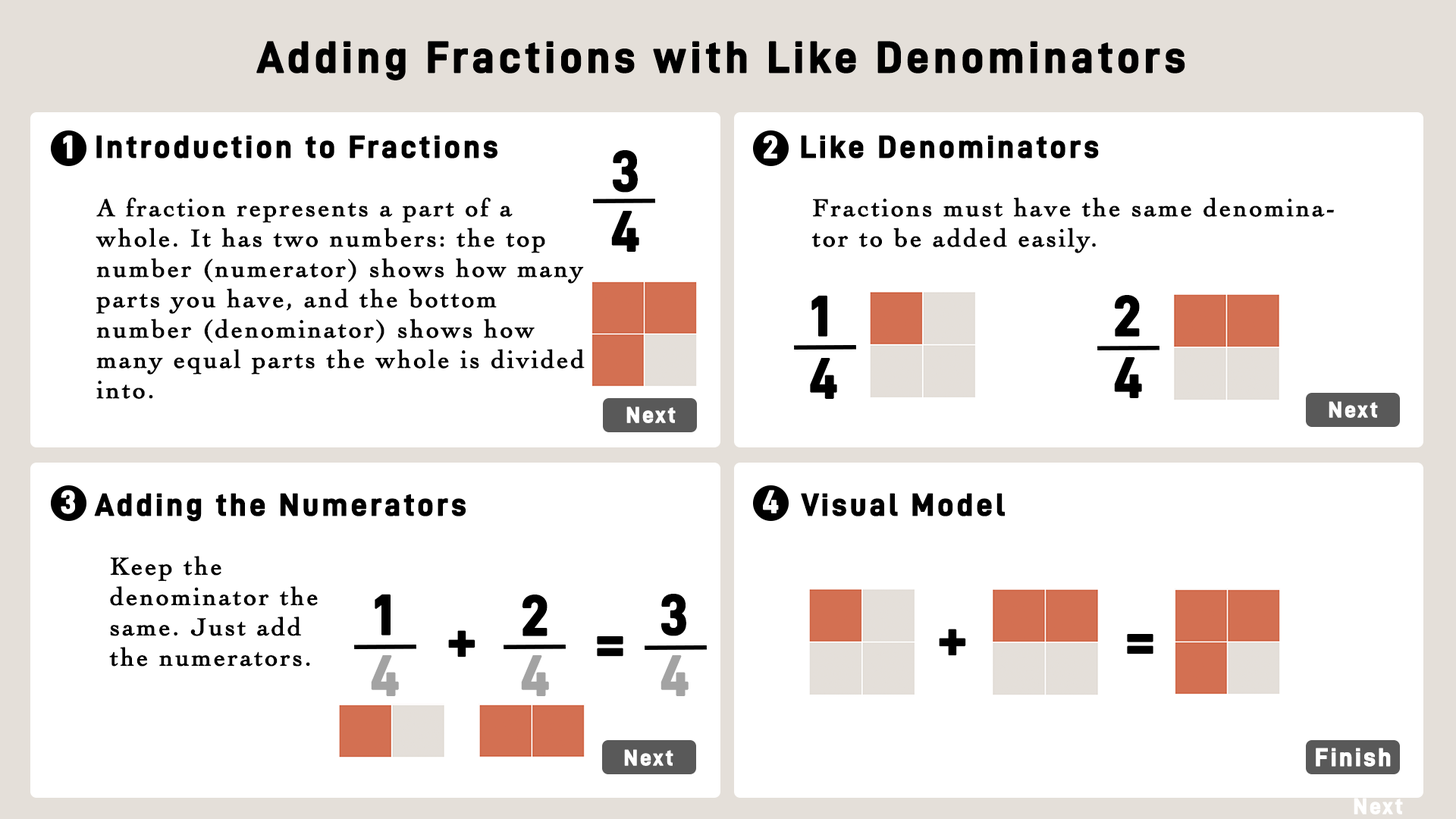
<style>
.page{position:relative;width:1456px;height:819px;background:#ffffff}
.page>*{position:absolute;margin:0}
.t1{font:44.2px "D-DIN-Bold";letter-spacing:0.075em;color:#000000;font-weight:bold}
.t2{font:31.6px "D-DIN-Bold";letter-spacing:0.075em;color:#ffffff;font-weight:bold}
.t3{font:31.6px "D-DIN-Bold";letter-spacing:0.075em;color:#000000;font-weight:bold}
.t4{font:56.9px "D-DIN-Bold";letter-spacing:0.075em;color:#000000;font-weight:bold}
.t5{font:25.3px "Cochin";letter-spacing:0.075em;color:#000000;font-weight:bold}
.t6{font:22.1px "D-DIN-Bold";letter-spacing:0.075em;color:#ffffff;font-weight:bold}
.t7{font:56.9px "D-DIN-Bold";letter-spacing:0.075em;color:#a3a3a3;font-weight:bold}
.t8{font:25.3px "D-DIN-Bold";letter-spacing:0.075em;color:#ffffff;font-weight:bold}
</style>
<div class="page">
<p class="t1" style="left:256px;top:41px;width:929px;height:39px">Adding Fractions with Like Denominators</p>
<p class="t2" style="left:63px;top:135px;width:10px;height:23px">1</p>
<p class="t3" style="left:96px;top:135px;width:401px;height:23px">Introduction to Fractions</p>
<p class="t2" style="left:763px;top:135px;width:14px;height:23px">2</p>
<p class="t3" style="left:801px;top:135px;width:298px;height:23px">Like Denominators</p>
<p class="t4" style="left:613px;top:150px;width:25px;height:43px">3</p>
<p class="t5" style="left:96px;top:197px;width:489px;height:202px">A fraction represents a part of a whole. It has two numbers: the top number (numerator) shows how many parts you have, and the bottom number (denominator) shows how many equal parts the whole is divided into.</p>
<p class="t5" style="left:811px;top:197px;width:523px;height:56px">Fractions must have the same denominator to be added easily.</p>
<p class="t4" style="left:611px;top:211px;width:28px;height:41px">4</p>
<p class="t4" style="left:811px;top:295px;width:16px;height:42px">1</p>
<p class="t4" style="left:1115px;top:295px;width:25px;height:42px">2</p>
<p class="t4" style="left:810px;top:358px;width:27px;height:41px">4</p>
<p class="t4" style="left:1114px;top:357px;width:28px;height:41px">4</p>
<p class="t6" style="left:626px;top:406px;width:50px;height:17px">Next</p>
<p class="t2" style="left:61px;top:490px;width:14px;height:24px">3</p>
<p class="t3" style="left:94px;top:493px;width:372px;height:29px">Adding the Numerators</p>
<p class="t2" style="left:763px;top:490px;width:16px;height:23px">4</p>
<p class="t3" style="left:801px;top:493px;width:204px;height:23px">Visual Model</p>
<p class="t5" style="left:109px;top:556px;width:209px;height:111px">Keep the <br>denominator the same. Just add the numerators.</p>
<p class="t4" style="left:375px;top:594px;width:16px;height:41px">1</p>
<p class="t4" style="left:661px;top:594px;width:25px;height:42px">3</p>
<p class="t4" style="left:522px;top:595px;width:26px;height:41px">2</p>
<p class="t4" style="left:939px;top:629px;width:27px;height:27px">+</p>
<p class="t4" style="left:448px;top:630px;width:27px;height:27px">+</p>
<p class="t4" style="left:597px;top:636px;width:26px;height:21px">=</p>
<p class="t4" style="left:1127px;top:634px;width:26px;height:20px">=</p>
<p class="t7" style="left:371px;top:655px;width:28px;height:41px">4</p>
<p class="t7" style="left:521px;top:655px;width:28px;height:41px">4</p>
<p class="t7" style="left:660px;top:655px;width:29px;height:41px">4</p>
<p class="t8" style="left:1316px;top:748px;width:75px;height:19px">Finish</p>
</div>
